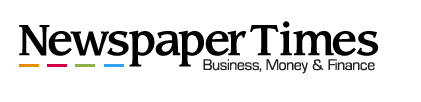
<style>
.page{position:relative;width:421px;height:102px;background:#ffffff}
.page>*{position:absolute;margin:0}
.t1{font:45px "Sling";color:#000000}
.t2{font:16px "WaukeganLDO";color:#232323}
</style>
<div class="page">
<p class="t1" style="left:19px;top:21px;width:360px;height:46px">Newspaper Times</p>
<p class="t2" style="left:203px;top:59px;width:172px;height:15px">Business,  Money &amp; Finance</p>
</div>
